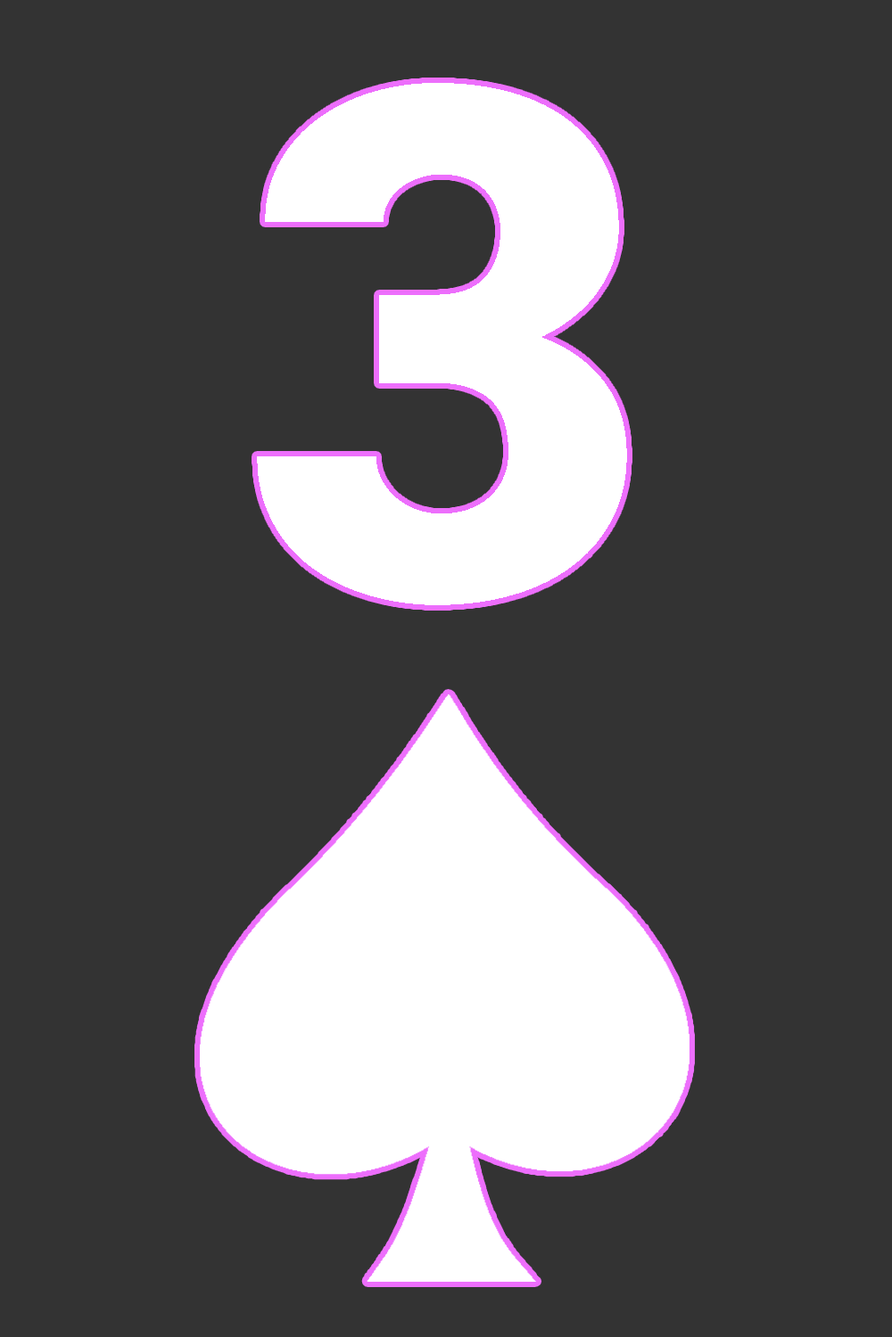
<style>
.page{position:relative;width:892px;height:1337px;background:#333333}
.page>*{position:absolute;margin:0}
.t1{font:713.3px "Roboto-Black";letter-spacing:0.02em;color:#ffffff}
</style>
<div class="page">
<p class="t1" style="left:257px;top:83px;width:370px;height:522px">3</p>
</div>
